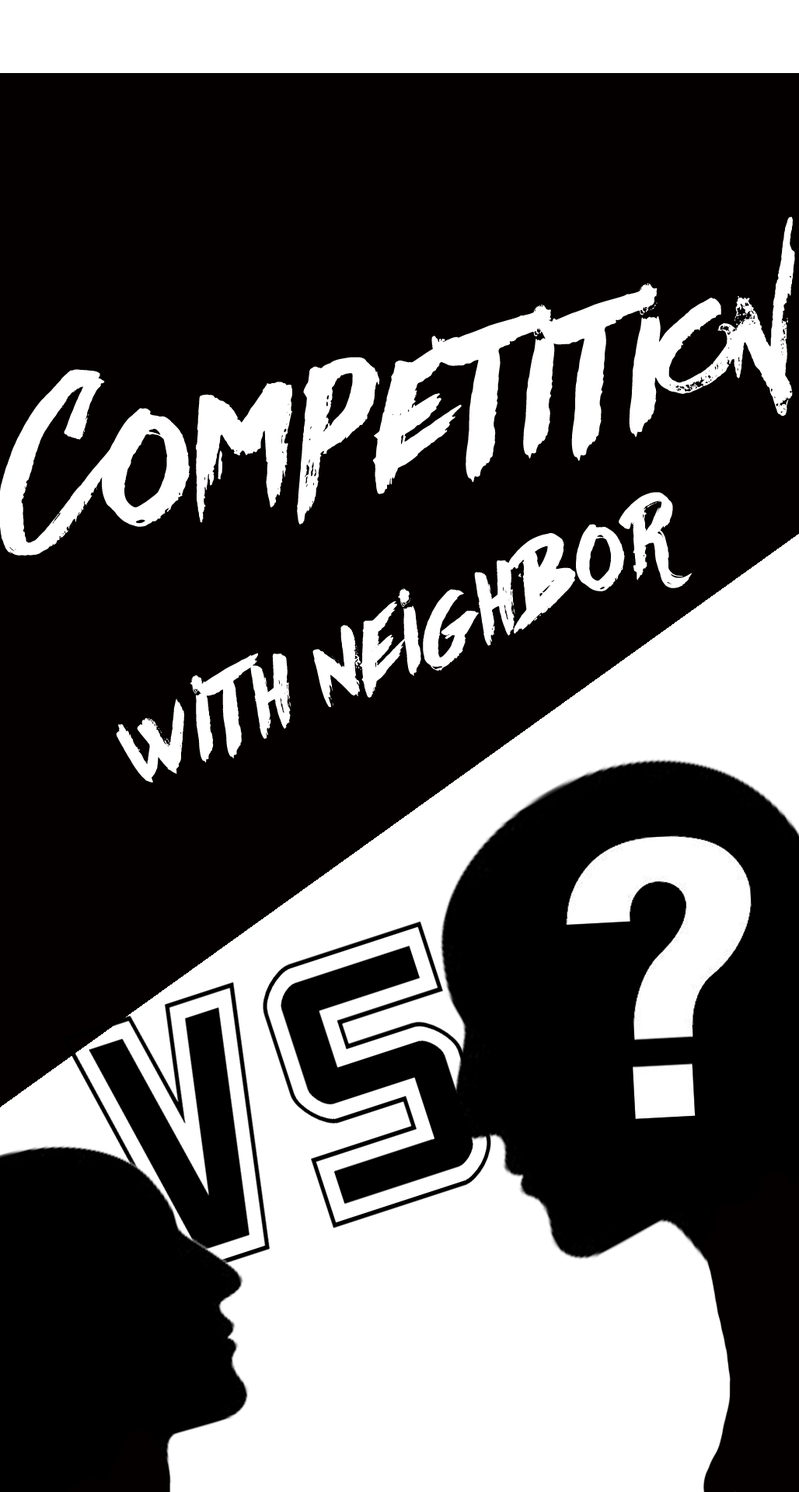
<style>
.page{position:relative;width:799px;height:1492px;background:#040000}
.page>*{position:absolute;margin:0}
.t1{font:236.2px "Againts";color:#ffffff}
.t2{font:134.6px "Againts";color:#ffffff}
</style>
<div class="page">
<p class="t1" style="left:0px;top:217px;width:795px;height:339px;rotate:-11deg">Competition</p>
<p class="t2" style="left:116px;top:492px;width:577px;height:291px;rotate:-23deg">with neighbor</p>
</div>
